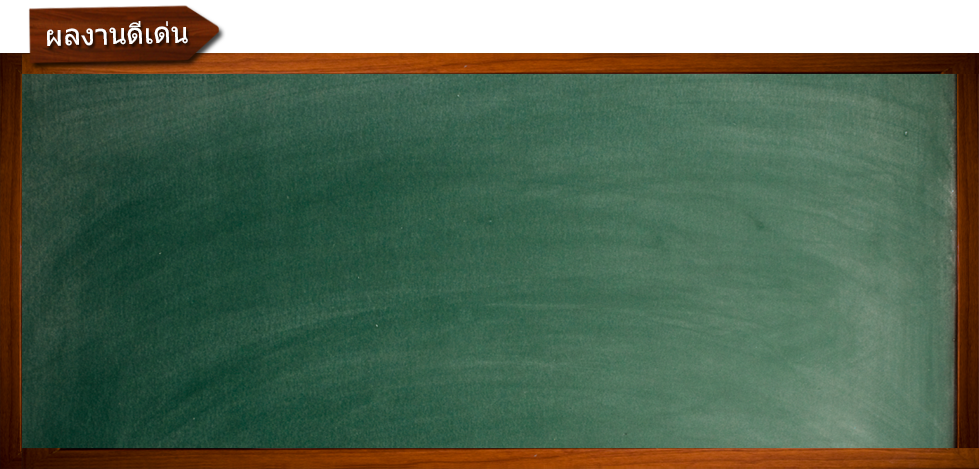
<style>
.page{position:relative;width:979px;height:469px}
.page>*{position:absolute;margin:0}
.t1{font:28.6px "Tahoma";color:#ffffff}
</style>
<div class="page">
<p class="t1" style="left:47px;top:21px;width:141px;height:25px;rotate:-1deg">ผลงานดีเด่น</p>
</div>
